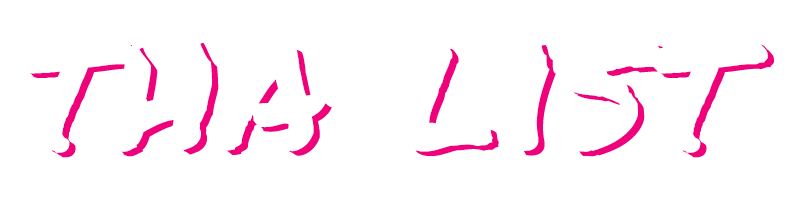
<style>
.page{position:relative;width:800px;height:200px;background:#ffffff}
.page>*{position:absolute;margin:0}
.t1{font:180px "PermanentMarker";letter-spacing:0.025em;color:#ffffff}
</style>
<div class="page">
<p class="t1" style="left:26px;top:42px;width:748px;height:116px">tha list</p>
</div>
